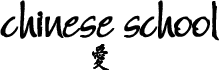
<style>
.page{position:relative;width:219px;height:70px;background:#ffffff}
.page>*{position:absolute;margin:0}
.t1{font:47px "BergellLetPlain";letter-spacing:-0.035em;color:#010101;font-weight:bold}
</style>
<div class="page">
<p class="t1" style="left:0px;top:0px;width:219px;height:41px">chinese school</p>
</div>
